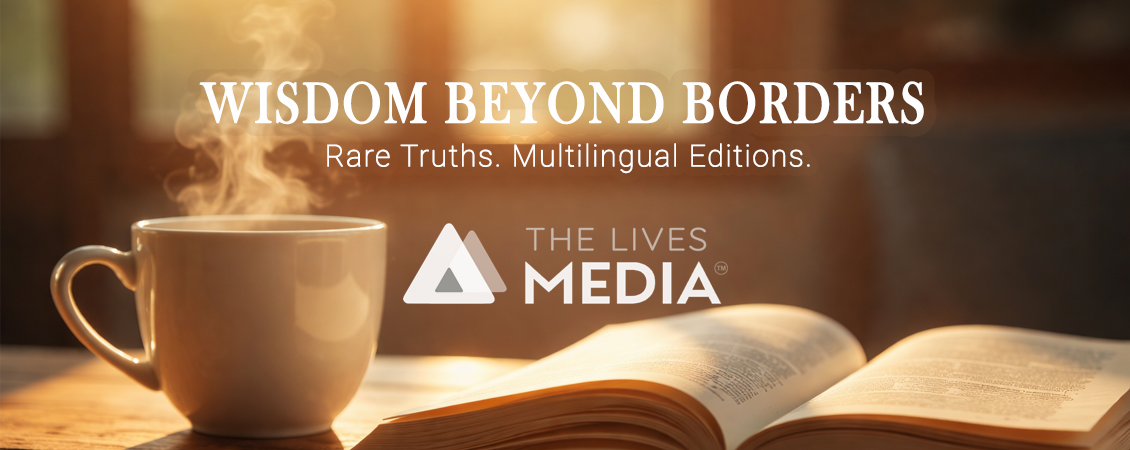
<style>
.page{position:relative;width:1130px;height:450px}
.page>*{position:absolute;margin:0}
.t1{font:58.8px "BaskOldFace";letter-spacing:0.03em;color:#fefefe;font-weight:bold;scale:0.82 1}
.t2{font:30px "Roboto-Thin";letter-spacing:0.03em;color:#fefefe;font-weight:bold}
</style>
<div class="page">
<p class="t1" style="left:199px;top:81px;width:725px;height:44px">WISDOM BEYOND BORDERS</p>
<p class="t2" style="left:327px;top:143px;width:483px;height:31px">Rare Truths. Multilingual Editions.</p>
</div>
